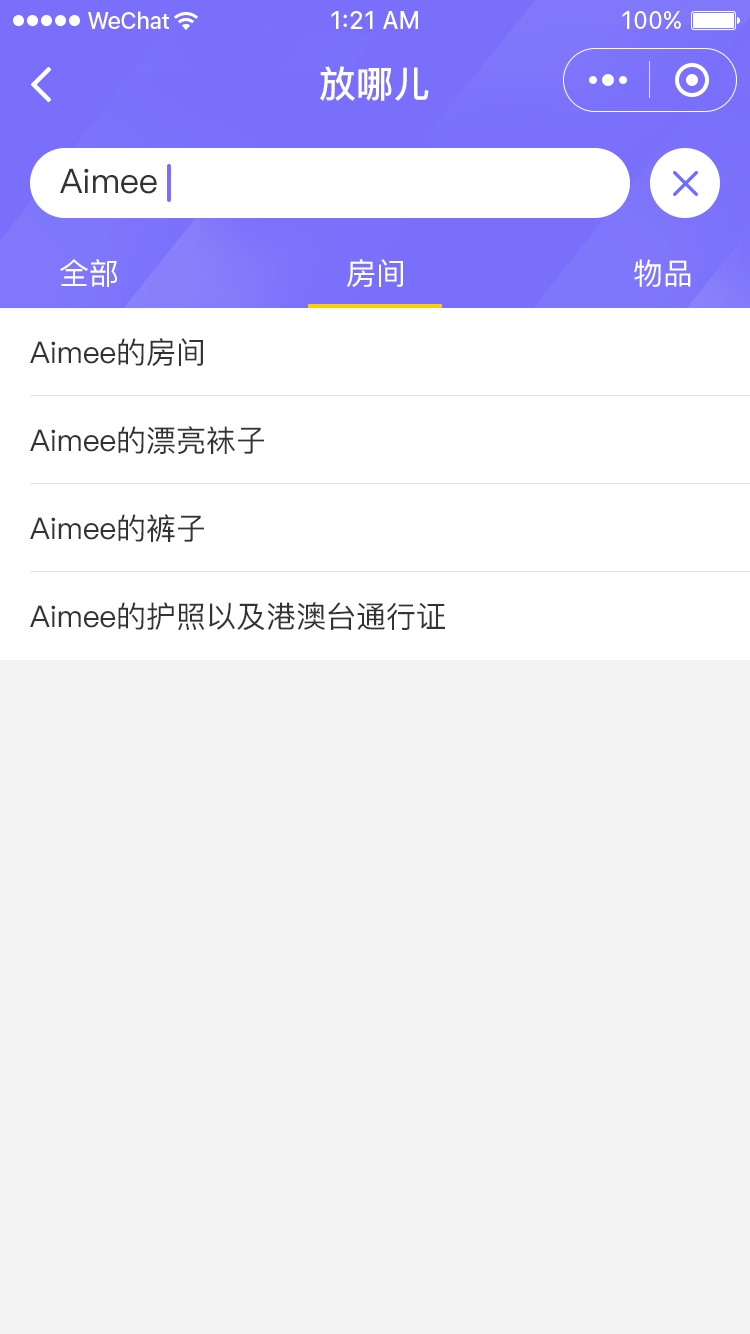
<style>
.page{position:relative;width:750px;height:1334px;background:#f3f3f3}
.page>*{position:absolute;margin:0}
.t1{font:37px "PingFang-SC-Bold";color:#ffffff}
.t2{font:34px "PingFang-SC-Medium";color:#333333}
.t3{font:30px "PingFang-SC-Medium";color:#ffffff}
.t4{font:30px "PingFang-SC-Medium";color:#333333}
</style>
<div class="page">
<p class="t1" style="left:320px;top:66px;width:109px;height:35px">放哪儿</p>
<p class="t2" style="left:60px;top:168px;width:97px;height:26px">Aimee</p>
<p class="t3" style="left:60px;top:259px;width:57px;height:28px">全部</p>
<p class="t3" style="left:347px;top:259px;width:56px;height:28px">房间</p>
<p class="t3" style="left:634px;top:259px;width:57px;height:28px">物品</p>
<p class="t4" style="left:30px;top:338px;width:173px;height:28px">Aimee的房间</p>
<p class="t4" style="left:30px;top:426px;width:234px;height:28px">Aimee的漂亮袜子</p>
<p class="t4" style="left:30px;top:514px;width:174px;height:28px">Aimee的裤子</p>
<p class="t4" style="left:30px;top:602px;width:415px;height:29px">Aimee的护照以及港澳台通行证</p>
</div>
